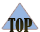
<style>
.page{position:relative;width:40px;height:32px;background:#ffffff}
.page>*{position:absolute;margin:0}
.t1{font:18px "BernardMT-Condensed";color:#252009;text-transform:uppercase;scale:0.87 1}
</style>
<div class="page">
<p class="t1" style="left:8px;top:18px;width:25px;height:14px">Top</p>
</div>
